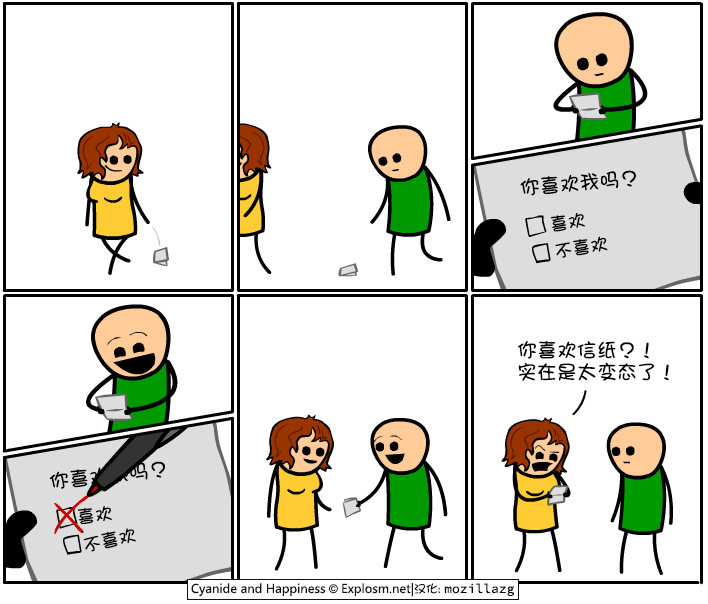
<style>
.page{position:relative;width:708px;height:604px;background:#ffffff}
.page>*{position:absolute;margin:0}
.t1{font:20px "DFGirl";color:#000000}
.t2{font:18px "DFGirl";color:#000000}
.t3{font:20px/22px "DFGirl";color:#000000}
</style>
<div class="page">
<p class="t1" style="left:520px;top:170px;width:116px;height:26px;rotate:-5deg">你喜欢我吗？</p>
<p class="t2" style="left:550px;top:212px;width:35px;height:20px;rotate:-9deg">喜欢</p>
<p class="t2" style="left:555px;top:236px;width:53px;height:22px;rotate:-9deg">不喜欢</p>
<p class="t3" style="left:517px;top:340px;width:152px;height:41px">你喜欢信纸？！<br>实在是太变态了！</p>
<p class="t1" style="left:49px;top:461px;width:116px;height:28px;rotate:-6deg">你喜欢我吗？</p>
<p class="t2" style="left:77px;top:506px;width:35px;height:18px;rotate:-7deg">喜欢</p>
<p class="t2" style="left:83px;top:528px;width:53px;height:24px;rotate:-12deg">不喜欢</p>
</div>
